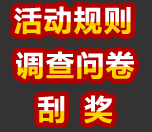
<style>
.page{position:relative;width:152px;height:132px;background:#333333}
.page>*{position:absolute;margin:0}
.t1{font:30px "FZLTCHJW--GB1-0"}
</style>
<div class="page">
<p class="t1" style="left:14px;top:6px;width:117px;height:29px">活动规则</p>
<p class="t1" style="left:16px;top:51px;width:118px;height:29px">调查问卷</p>
<p class="t1" style="left:38px;top:95px;width:75px;height:29px">刮  奖</p>
</div>
